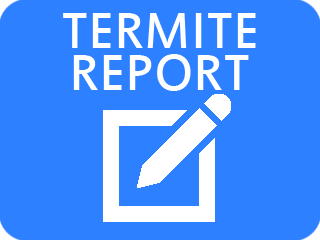
<style>
.page{position:relative;width:320px;height:240px;background:#2d80ff}
.page>*{position:absolute;margin:0}
.t1{font:56px "EstrangeloEdessa";color:#ffffff}
</style>
<div class="page">
<p class="t1" style="left:63px;top:13px;width:193px;height:35px">TERMITE</p>
<p class="t1" style="left:73px;top:54px;width:176px;height:37px">REPORT</p>
</div>
